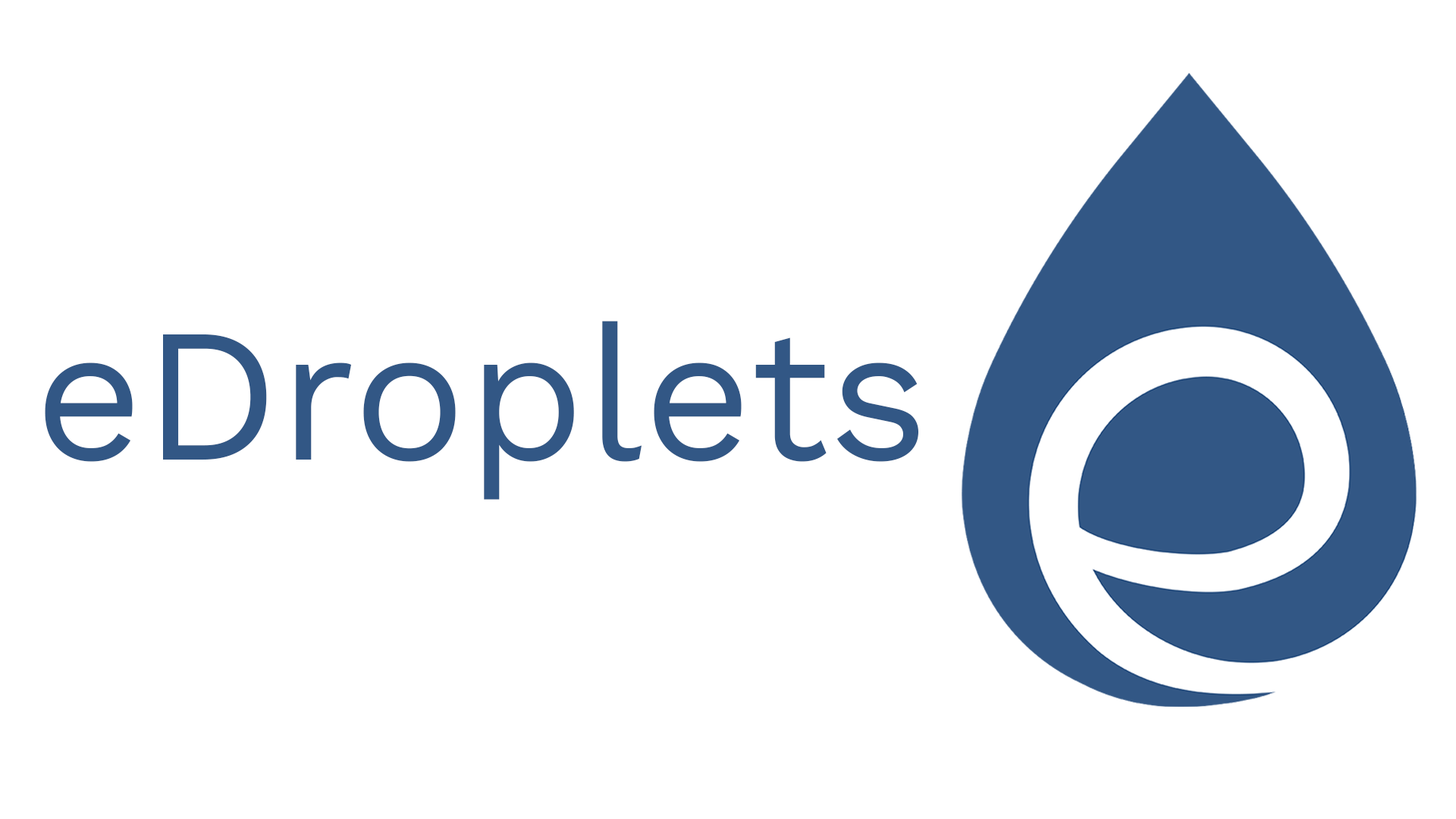
<style>
.page{position:relative;width:1456px;height:819px;background:#ffffff}
.page>*{position:absolute;margin:0}
.t1{font:189.6px "WorkSans-Regular";color:#325785}
</style>
<div class="page">
<p class="t1" style="left:45px;top:321px;width:873px;height:179px">eDroplets</p>
</div>
